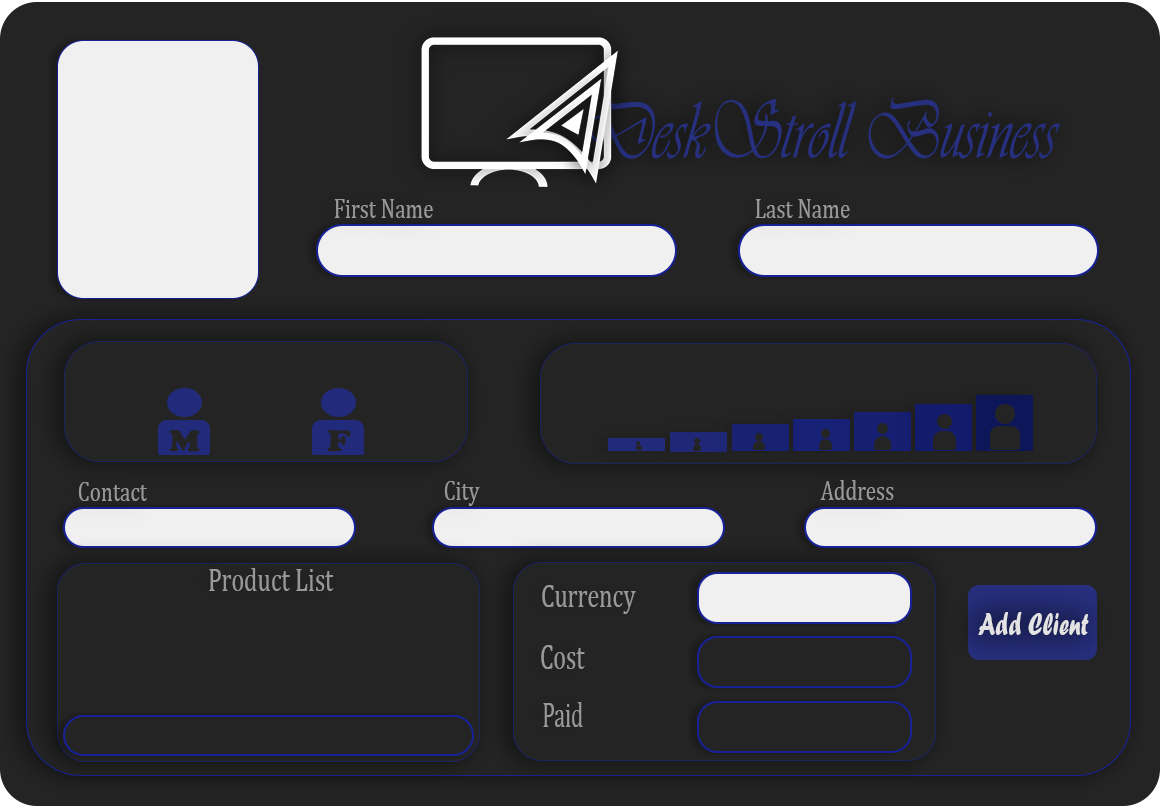
<style>
.page{position:relative;width:1160px;height:806px;background:#242425}
.page>*{position:absolute;margin:0}
.t1{font:84.8px "Vivaldii";color:#27307e;scale:0.72 1}
.t2{font:28.4px "Cambria";color:#989898;scale:0.75 1}
.t3{font:31.4px "CooperBlack";color:#242425;scale:1.13 1}
.t4{font:32.6px "Cambria";color:#989898;scale:0.74 1}
.t5{font:32.1px "ForteMT";color:#e3e3e3;scale:0.73 1}
.t6{font:34.7px "Cambria";color:#989898;scale:0.69 1}
.t7{font:34.6px "Cambria";color:#989898;scale:0.64 1}
</style>
<div class="page">
<p class="t1" style="left:590px;top:97px;width:471px;height:62px">DeskStroll Business</p>
<p class="t2" style="left:334px;top:199px;width:99px;height:19px">First Name</p>
<p class="t2" style="left:755px;top:199px;width:95px;height:19px">Last Name</p>
<p class="t3" style="left:169px;top:430px;width:31px;height:22px;rotate:1deg">M</p>
<p class="t3" style="left:327px;top:430px;width:24px;height:22px;rotate:1deg">F</p>
<p class="t2" style="left:78px;top:482px;width:69px;height:19px">Contact</p>
<p class="t2" style="left:444px;top:481px;width:36px;height:25px">City</p>
<p class="t2" style="left:820px;top:480px;width:74px;height:20px">Address</p>
<p class="t4" style="left:209px;top:568px;width:125px;height:23px">Product List</p>
<p class="t4" style="left:542px;top:585px;width:94px;height:29px">Currency</p>
<p class="t5" style="left:978px;top:612px;width:111px;height:23px">Add Client</p>
<p class="t6" style="left:541px;top:645px;width:44px;height:24px">Cost</p>
<p class="t7" style="left:543px;top:702px;width:40px;height:25px">Paid</p>
</div>
